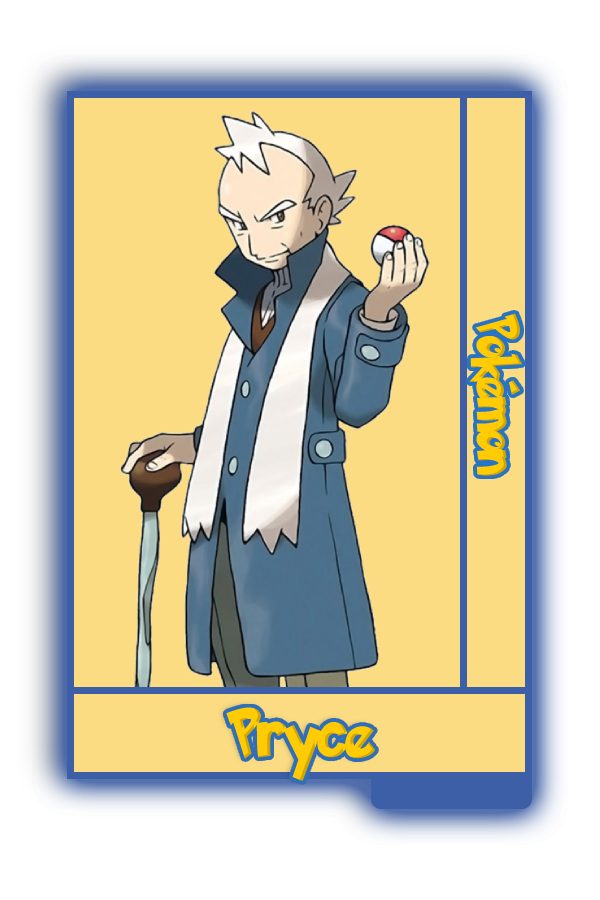
<style>
.page{position:relative;width:600px;height:900px;background:#fbdc83}
.page>*{position:absolute;margin:0}
.t1{font:48.8px "PokemonSolidNormal";color:#ffcb05;scale:0.8 1}
.t2{font:56.6px "PokemonSolidNormal";color:#ffcb05;scale:0.92 1}
</style>
<div class="page">
<p class="t1" style="left:469px;top:313px;width:54px;height:163px;rotate:90deg">Pokémon</p>
<p class="t2" style="left:226px;top:707px;width:150px;height:74px">Pryce</p>
</div>
